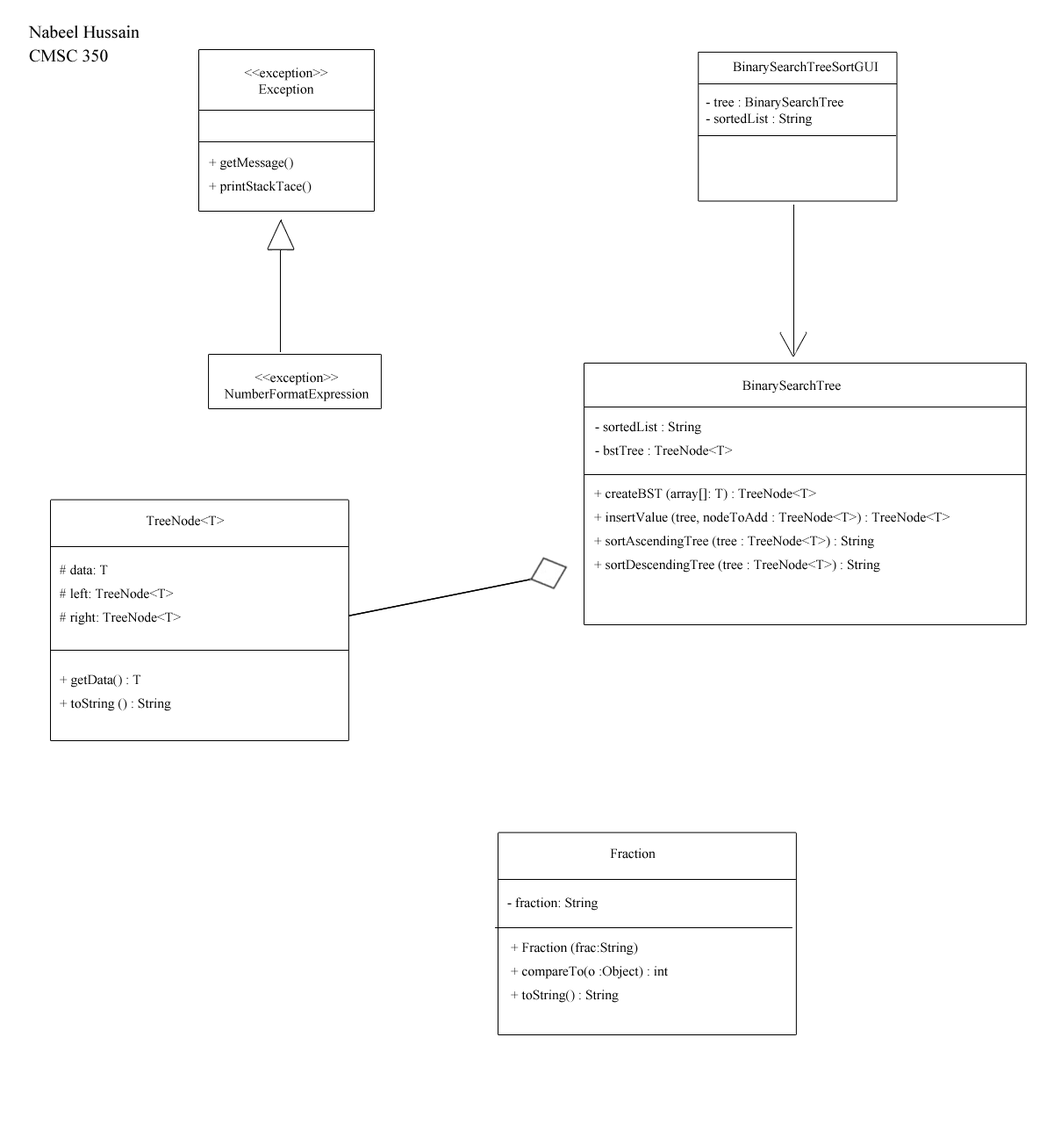
<style>
.page{position:relative;width:1054px;height:1131px;background:#ffffff}
.page>*{position:absolute;margin:0}
.t1{font:17.6px/23.7px "TimesNewRomanPSMT";color:#000000}
.t2{font:13.6px "TimesNewRomanPSMT";color:#000000}
.t3{font:13.6px/23.7px "TimesNewRomanPSMT";color:#000000}
</style>
<div class="page">
<p class="t1" style="left:28px;top:25px;width:112px;height:37px">Nabeel Hussain<br>CMSC 350</p>
<p class="t2" style="left:733px;top:61px;width:146px;height:14px">BinarySearchTreeSortGUI</p>
<p class="t2" style="left:244px;top:68px;width:84px;height:29px;text-align:center">&lt;&lt;exception&gt;&gt;<br>Exception</p>
<p class="t2" style="left:706px;top:97px;width:138px;height:29px"><span class="t3">- tree : </span>BinarySearchTree<br>- sortedList : String</p>
<p class="t3" style="left:209px;top:157px;width:103px;height:37px">+ getMessage()<br>+ printStackTace()</p>
<p class="t2" style="left:224px;top:372px;width:146px;height:29px;text-align:center">&lt;&lt;exception&gt;&gt;<br>NumberFormatExpression</p>
<p class="t2" style="left:743px;top:380px;width:98px;height:13px">BinarySearchTree</p>
<p class="t3" style="left:595px;top:421px;width:138px;height:35px">- sortedList : String<br>- bstTree : TreeNode&lt;T&gt;</p>
<p class="t3" style="left:594px;top:488px;width:356px;height:84px">+ createBST (array[]: T) : TreeNode&lt;T&gt;<br>+ insertValue (tree, nodeToAdd : TreeNode&lt;T&gt;) : TreeNode&lt;T&gt;<br>+ sortAscendingTree (tree : TreeNode&lt;T&gt;) : String<br>+ sortDescendingTree (tree : TreeNode&lt;T&gt;) : String</p>
<p class="t2" style="left:147px;top:515px;width:78px;height:11px">TreeNode&lt;T&gt;</p>
<p class="t3" style="left:60px;top:565px;width:121px;height:60px"># data: T<br># left: TreeNode&lt;T&gt;<br># right: TreeNode&lt;T&gt;</p>
<p class="t3" style="left:60px;top:674px;width:111px;height:37px">+ getData() : T<br>+ toString () : String</p>
<p class="t2" style="left:610px;top:848px;width:46px;height:11px">Fraction</p>
<p class="t2" style="left:507px;top:897px;width:91px;height:13px">- fraction: String</p>
<p class="t3" style="left:511px;top:942px;width:157px;height:61px">+ Fraction (frac:String) <br>+ compareTo(o :Object) : int<br>+ toString() : String</p>
</div>
